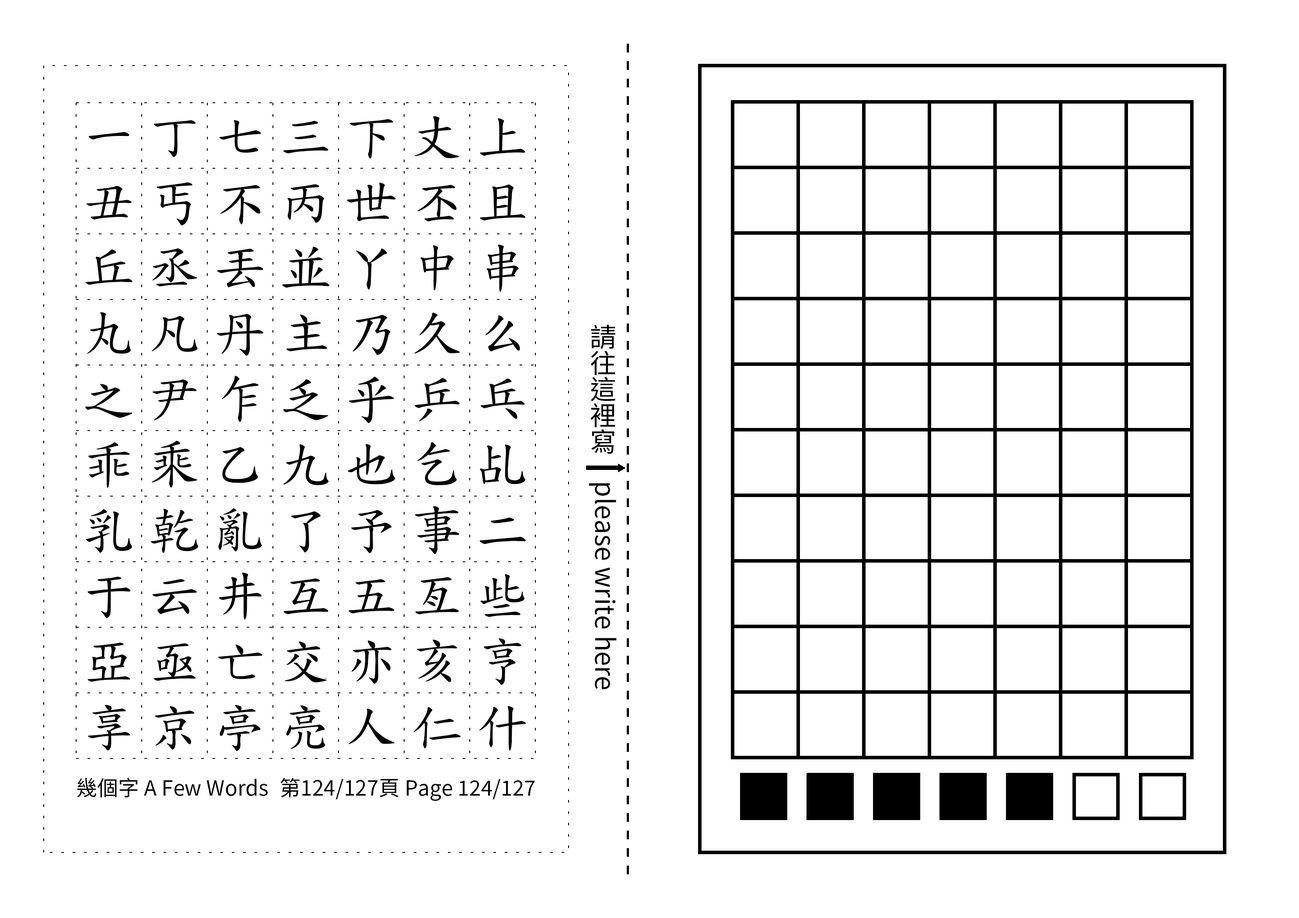
<style>
.page{position:relative;width:1299px;height:918px;background:#ffffff}
.page>*{position:absolute;margin:0}
.t1{font:52.5px/65.6px "TW-Kai-98_1";letter-spacing:0.25em;color:#000000}
.t2{font:26.2px "SourceHanSansTC-Regular";color:#000000}
.t3{font:21px "SourceHanSansTC-Regular";color:#000000}
</style>
<div class="page">
<p class="t1" style="left:85px;top:116px;width:441px;height:636px;text-align:center">一丁七三下丈上丑丐不丙世丕且丘丞丟並丫中串丸凡丹主乃久么之尹乍乏乎乒乓乖乘乙九也乞乩乳乾亂了予事二于云井互五亙些亞亟亡交亦亥亨享京亭亮人仁什</p>
<p class="t2" style="left:589px;top:324px;width:28px;height:366px;text-align:center">請往這裡寫　please write here</p>
<p class="t3" style="left:77px;top:778px;width:191px;height:20px">幾個字 A Few Words</p>
<p class="t3" style="left:280px;top:778px;width:255px;height:23px">第124/127頁 Page 124/127</p>
</div>
